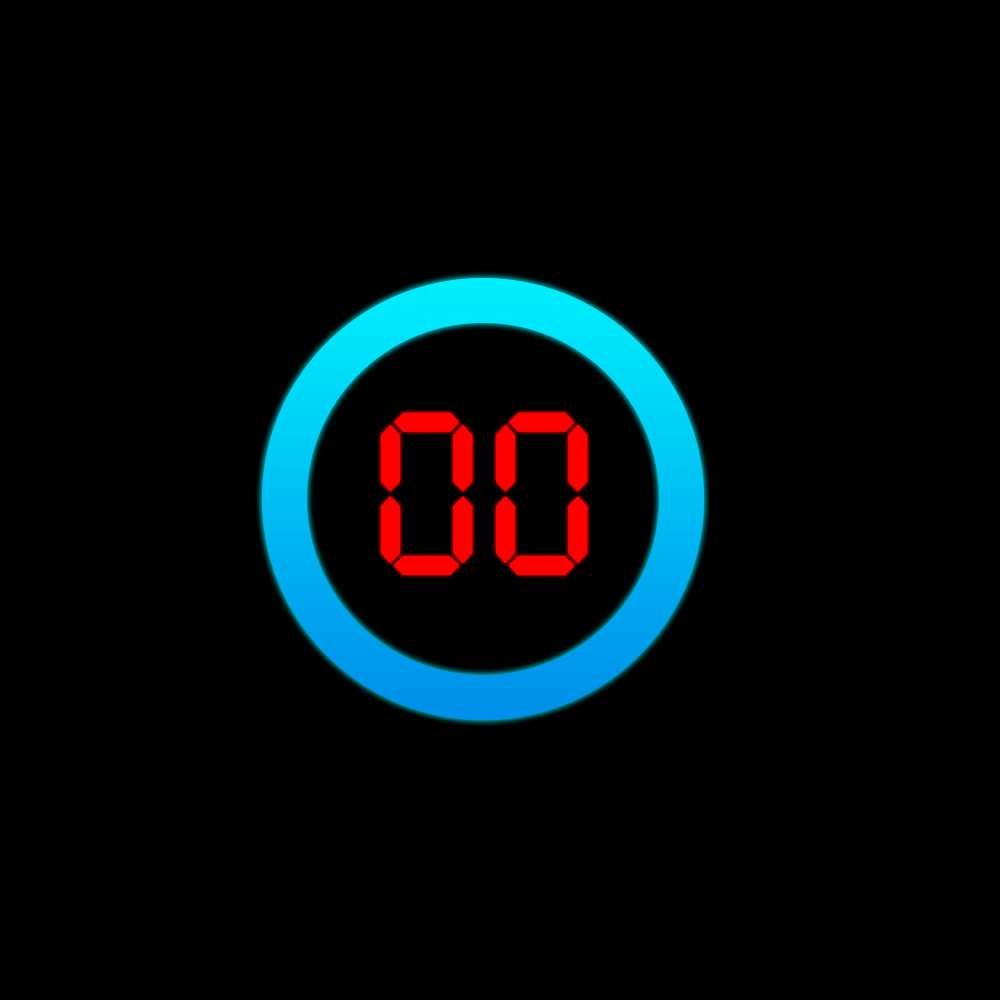
<style>
.page{position:relative;width:1000px;height:1000px;background:#000000}
.page>*{position:absolute;margin:0}
.t1{font:246.2px "TickingTimebombBB";color:#ff0000}
</style>
<div class="page">
<p class="t1" style="left:381px;top:412px;width:207px;height:163px">00</p>
</div>
